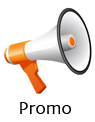
<style>
.page{position:relative;width:95px;height:122px;background:#ffffff}
.page>*{position:absolute;margin:0}
.t1{font:18px "Skia-Regular";color:#000000}
</style>
<div class="page">
<p class="t1" style="left:20px;top:102px;width:51px;height:12px">Promo</p>
</div>
